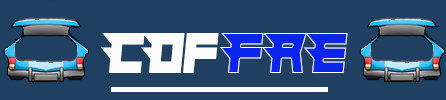
<style>
.page{position:relative;width:446px;height:100px;background:#1f4061}
.page>*{position:absolute;margin:0}
.t1{font:58.3px "Hindsight2020";color:#fbfbfb;scale:0.92 1}
.t2{font:58.3px "Hindsight2020";color:#0b25eb;scale:0.92 1}
</style>
<div class="page">
<p class="t1" style="left:101px;top:33px;width:118px;height:40px">COf</p>
<p class="t2" style="left:220px;top:33px;width:128px;height:40px">FRE</p>
</div>
